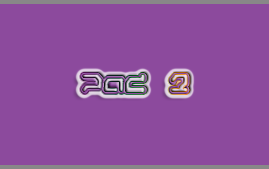
<style>
.page{position:relative;width:269px;height:169px;background:#8c4a9d}
.page>*{position:absolute;margin:0}
.t1{font:24px "GameboyGamegirl"}
</style>
<div class="page">
<p class="t1" style="left:80px;top:73px;width:110px;height:21px">Pad 2</p>
</div>
